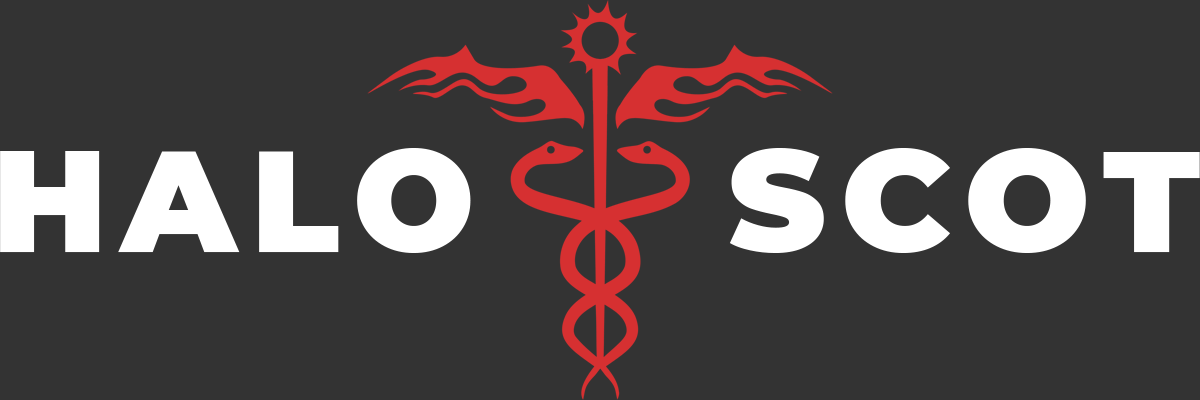
<style>
.page{position:relative;width:1200px;height:400px;background:#333333}
.page>*{position:absolute;margin:0}
.t1{font:142.7px "Montserrat-Black";letter-spacing:0.1em;color:#ffffff;text-transform:uppercase}
.t2{font:142.7px "Montserrat-Black";letter-spacing:0.1em;color:#ffffff;text-transform:uppercase;scale:1.04 1}
</style>
<div class="page">
<p class="t1" style="left:0px;top:148px;width:471px;height:105px">Halo</p>
<p class="t2" style="left:729px;top:148px;width:471px;height:105px">Scot</p>
</div>
